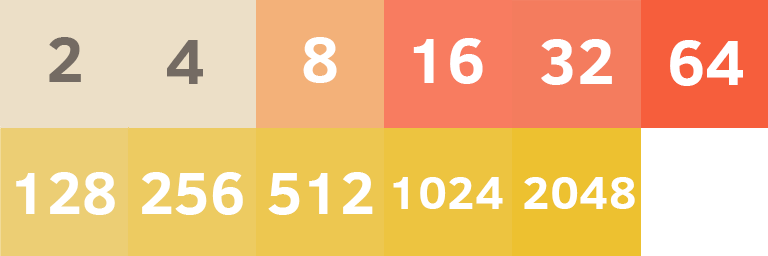
<style>
.page{position:relative;width:768px;height:256px}
.page>*{position:absolute;margin:0}
.t1{font:65px "ClearSans-Bold";color:#746b63}
.t2{font:65px "ClearSans-Bold";color:#ffffff}
.t3{font:60px "ClearSans-Bold";color:#ffffff}
.t4{font:47px "ClearSans-Bold";color:#ffffff}
</style>
<div class="page">
<p class="t1" style="left:49px;top:37px;width:32px;height:45px">2</p>
<p class="t1" style="left:167px;top:40px;width:36px;height:44px">4</p>
<p class="t2" style="left:303px;top:37px;width:34px;height:46px">8</p>
<p class="t2" style="left:413px;top:38px;width:70px;height:46px">16</p>
<p class="t2" style="left:541px;top:39px;width:71px;height:46px">32</p>
<p class="t2" style="left:670px;top:40px;width:73px;height:46px">64</p>
<p class="t3" style="left:16px;top:172px;width:99px;height:43px">128</p>
<p class="t3" style="left:142px;top:172px;width:101px;height:43px">256</p>
<p class="t3" style="left:268px;top:172px;width:105px;height:43px">512</p>
<p class="t4" style="left:393px;top:177px;width:110px;height:32px">1024</p>
<p class="t4" style="left:524px;top:177px;width:111px;height:32px">2048</p>
</div>
